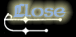
<style>
.page{position:relative;width:76px;height:37px;background:#000000}
.page>*{position:absolute;margin:0}
.t1{font:18px "Celtic-Normal";color:#94b2da}
.t2{font:18px "CathedralExtendedNormal";color:#94b2da}
</style>
<div class="page">
<p class="t1" style="left:13px;top:3px;width:53px;height:15px"><span class="t2">C</span>lose</p>
</div>
